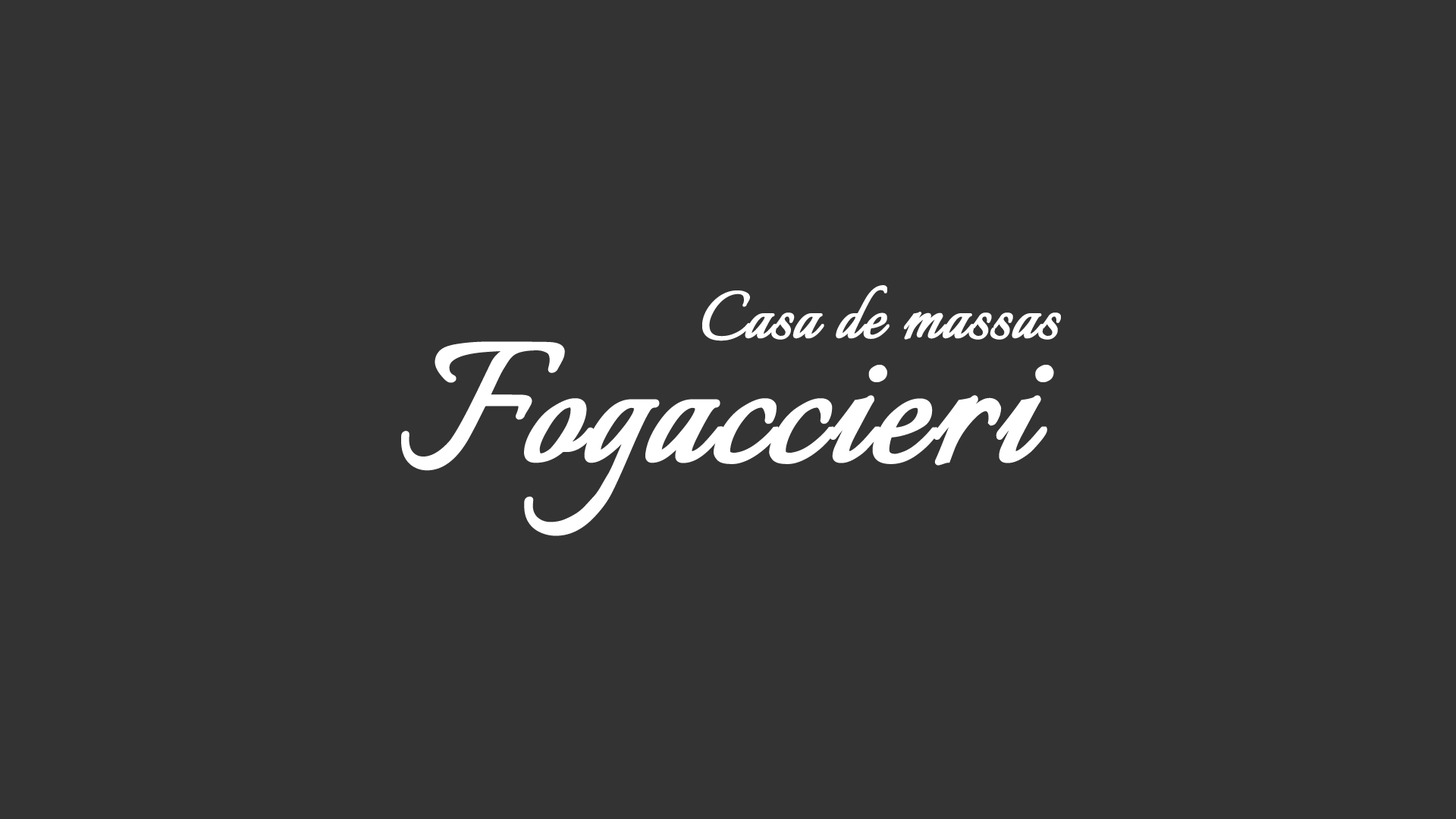
<style>
.page{position:relative;width:1456px;height:819px;background:#333333}
.page>*{position:absolute;margin:0}
.t1{font:82.7px "Italianno-Regular";color:#ffffff;font-weight:bold}
.t2{font:209.7px "Italianno-Regular";color:#ffffff;font-weight:bold}
</style>
<div class="page">
<p class="t1" style="left:702px;top:285px;width:359px;height:56px">Casa de massas</p>
<p class="t2" style="left:401px;top:341px;width:653px;height:195px">Fogaccieri</p>
</div>
